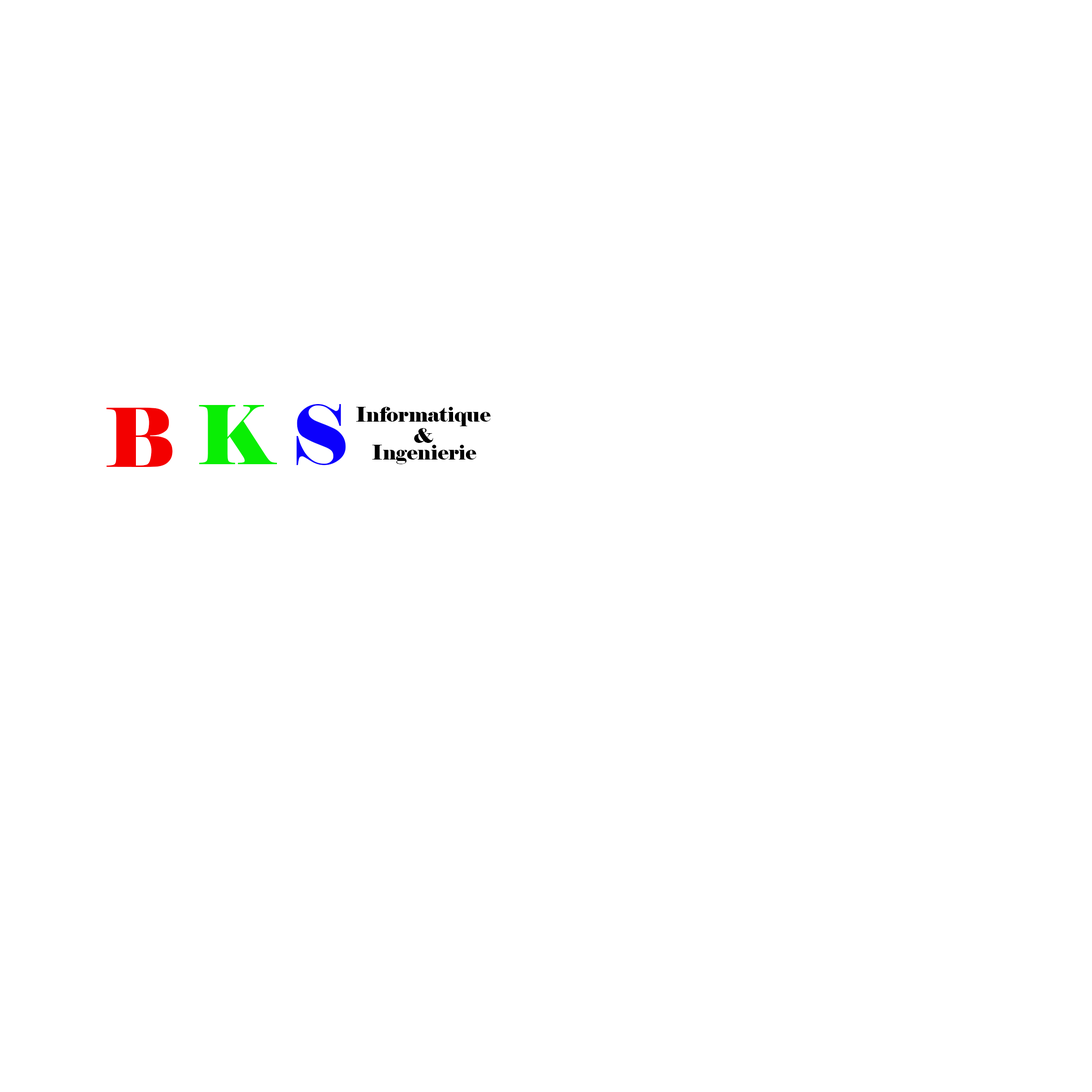
<style>
.page{position:relative;width:1092px;height:1092px;background:#ffffff}
.page>*{position:absolute;margin:0}
.t1{font:138.7px "Elephant-Regular";color:#f30000}
.t2{font:138.7px "Elephant-Regular";color:#09ee04}
.t3{font:138.7px "Elephant-Regular";color:#0c00fc}
.t4{font:34.7px "Elephant-Regular";color:#000000}
</style>
<div class="page">
<p class="t1" style="left:106px;top:407px;width:66px;height:60px">B</p>
<p class="t2" style="left:199px;top:405px;width:78px;height:59px">K</p>
<p class="t3" style="left:296px;top:404px;width:50px;height:61px">S</p>
<p class="t4" style="left:356px;top:407px;width:135px;height:19px">Informatique</p>
<p class="t4" style="left:414px;top:428px;width:19px;height:15px">&amp;</p>
<p class="t4" style="left:372px;top:445px;width:104px;height:19px">Ingenierie</p>
</div>
